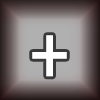
<style>
.page{position:relative;width:100px;height:100px}
.page>*{position:absolute;margin:0}
.t1{font:72px "HoboStd";color:#ffffff}
</style>
<div class="page">
<p class="t1" style="left:32px;top:35px;width:35px;height:42px">+</p>
</div>
